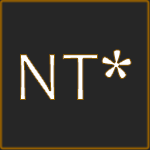
<style>
.page{position:relative;width:150px;height:150px;background:#262626}
.page>*{position:absolute;margin:0}
.t1{font:72px "Candara"}
</style>
<div class="page">
<p class="t1" style="left:20px;top:49px;width:112px;height:51px">NT*</p>
</div>
